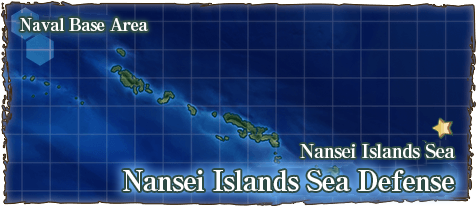
<style>
.page{position:relative;width:476px;height:206px}
.page>*{position:absolute;margin:0}
.t1{font:17px "RyuminPro-ExBold";letter-spacing:-0.04em;color:#ffffff}
.t2{font:19px "RyuminPro-ExBold";letter-spacing:-0.04em;color:#ffffff}
.t3{font:28px "RyuminPro-ExBold";letter-spacing:-0.04em;color:#ffffff}
</style>
<div class="page">
<p class="t1" style="left:20px;top:18px;width:128px;height:14px">Naval Base Area</p>
<p class="t2" style="left:300px;top:143px;width:155px;height:16px">Nansei Islands Sea</p>
<p class="t3" style="left:123px;top:170px;width:331px;height:22px">Nansei Islands Sea Defense</p>
</div>
